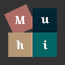
<style>
.page{position:relative;width:65px;height:65px;background:#333333}
.page>*{position:absolute;margin:0}
.t1{font:11.3px "CroissantOne-Regular";color:#ffffff}
</style>
<div class="page">
<p class="t1" style="left:15px;top:15px;width:10px;height:10px">M</p>
<p class="t1" style="left:41px;top:17px;width:9px;height:7px">u</p>
<p class="t1" style="left:16px;top:40px;width:9px;height:10px">h</p>
<p class="t1" style="left:43px;top:40px;width:5px;height:10px">i</p>
</div>
